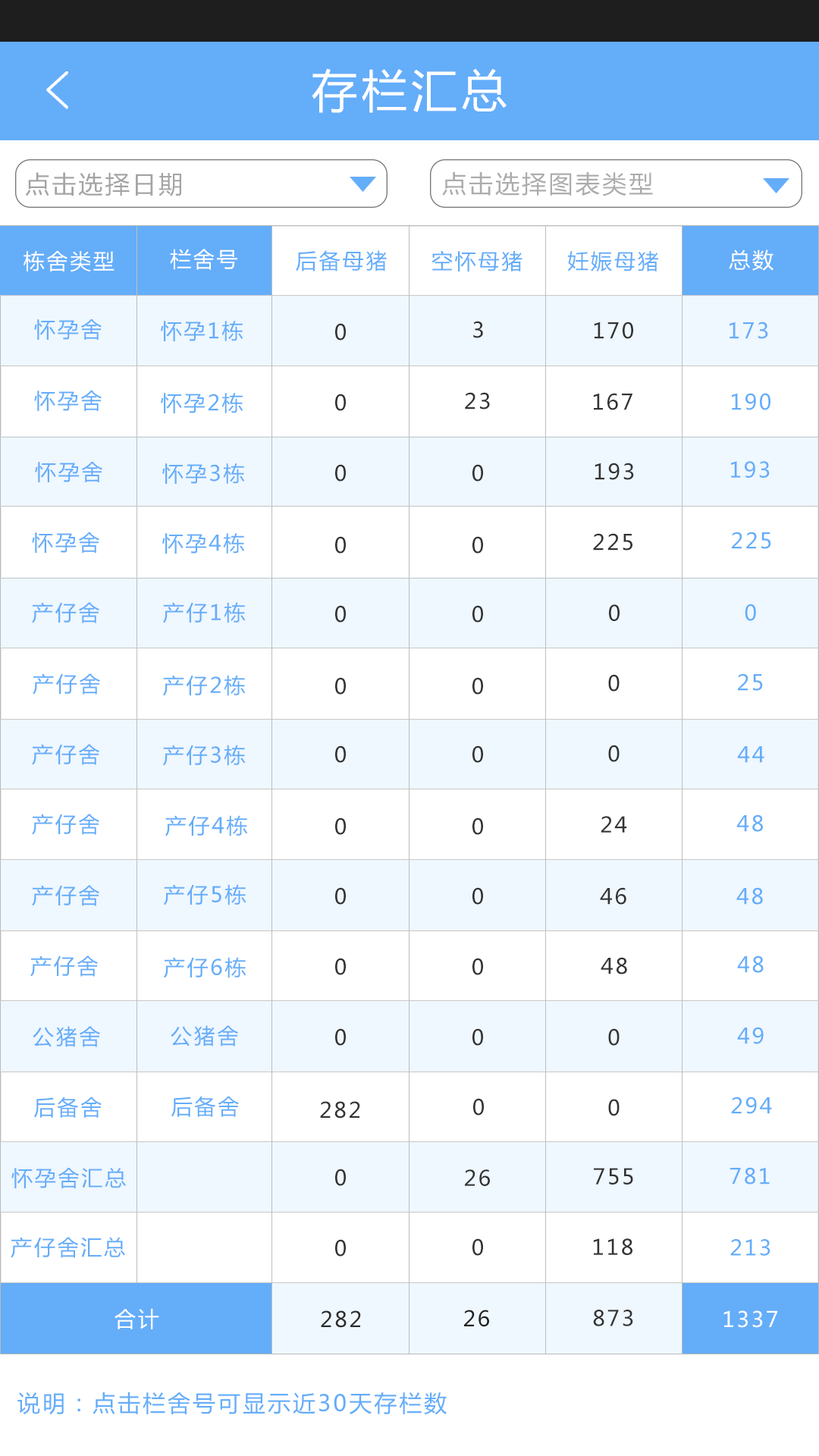
<style>
.page{position:relative;width:819px;height:1456px;background:#ffffff}
.page>*{position:absolute;margin:0}
.t1{font:45.5px "MicrosoftYaHei";letter-spacing:0.1em;color:#ffffff}
.t2{font:24.3px "MicrosoftYaHei";letter-spacing:0.1em;color:#a4a4a4}
.t3{font:24.3px "MicrosoftYaHei";letter-spacing:0.1em;color:#acacac}
.t4{font:21.2px "MicrosoftYaHei";letter-spacing:0.1em;color:#ffffff}
.t5{font:21.2px "MicrosoftYaHei";letter-spacing:0.1em;color:#64adf9}
.t6{font:21.2px "MicrosoftYaHei";letter-spacing:0.1em;color:#fefefe}
.t7{font:21.2px "MicrosoftYaHei";letter-spacing:0.1em;color:#333333}
.t8{font:21.2px "MicrosoftYaHei";letter-spacing:0.1em;color:#2b2b2b}
.t9{font:21.2px "MicrosoftYaHei";letter-spacing:0.1em;color:#222222}
.t10{font:21.2px "MicrosoftYaHei";letter-spacing:0.1em;color:#343434}
.t11{font:22.7px "MicrosoftYaHei";letter-spacing:0.1em;color:#64adf9}
</style>
<div class="page">
<p class="t1" style="left:312px;top:68px;width:195px;height:45px">存栏汇总</p>
<p class="t2" style="left:25px;top:172px;width:156px;height:24px">点击选择日期</p>
<p class="t3" style="left:442px;top:172px;width:211px;height:24px">点击选择图表类型</p>
<p class="t4" style="left:24px;top:251px;width:91px;height:21px">栋舍类型</p>
<p class="t4" style="left:170px;top:249px;width:67px;height:21px">栏舍号</p>
<p class="t5" style="left:296px;top:250px;width:91px;height:21px">后备母猪</p>
<p class="t5" style="left:431px;top:250px;width:91px;height:21px">空怀母猪</p>
<p class="t5" style="left:567px;top:251px;width:91px;height:20px">妊娠母猪</p>
<p class="t6" style="left:729px;top:249px;width:44px;height:22px">总数</p>
<p class="t5" style="left:34px;top:319px;width:68px;height:21px">怀孕舍</p>
<p class="t5" style="left:161px;top:321px;width:82px;height:20px">怀孕1栋</p>
<p class="t7" style="left:335px;top:323px;width:11px;height:17px">0</p>
<p class="t7" style="left:473px;top:321px;width:10px;height:17px">3</p>
<p class="t7" style="left:594px;top:322px;width:39px;height:17px">170</p>
<p class="t5" style="left:730px;top:322px;width:38px;height:17px">173</p>
<p class="t5" style="left:34px;top:391px;width:68px;height:20px">怀孕舍</p>
<p class="t5" style="left:161px;top:393px;width:82px;height:20px">怀孕2栋</p>
<p class="t7" style="left:335px;top:394px;width:11px;height:17px">0</p>
<p class="t7" style="left:465px;top:392px;width:25px;height:17px">23</p>
<p class="t7" style="left:593px;top:393px;width:39px;height:17px">167</p>
<p class="t5" style="left:732px;top:393px;width:38px;height:17px">190</p>
<p class="t5" style="left:35px;top:462px;width:67px;height:20px">怀孕舍</p>
<p class="t5" style="left:731px;top:461px;width:39px;height:17px">193</p>
<p class="t5" style="left:162px;top:463px;width:83px;height:21px">怀孕3栋</p>
<p class="t7" style="left:335px;top:464px;width:11px;height:18px">0</p>
<p class="t7" style="left:472px;top:464px;width:11px;height:18px">0</p>
<p class="t7" style="left:595px;top:463px;width:39px;height:17px">193</p>
<p class="t5" style="left:32px;top:532px;width:67px;height:21px">怀孕舍</p>
<p class="t5" style="left:162px;top:533px;width:83px;height:21px">怀孕4栋</p>
<p class="t7" style="left:593px;top:533px;width:39px;height:18px">225</p>
<p class="t5" style="left:732px;top:532px;width:39px;height:17px">225</p>
<p class="t7" style="left:335px;top:536px;width:11px;height:18px">0</p>
<p class="t7" style="left:472px;top:536px;width:11px;height:18px">0</p>
<p class="t5" style="left:32px;top:602px;width:67px;height:21px">产仔舍</p>
<p class="t5" style="left:163px;top:602px;width:83px;height:21px">产仔1栋</p>
<p class="t7" style="left:335px;top:605px;width:11px;height:18px">0</p>
<p class="t7" style="left:472px;top:605px;width:11px;height:18px">0</p>
<p class="t7" style="left:609px;top:604px;width:11px;height:17px">0</p>
<p class="t5" style="left:745px;top:604px;width:11px;height:17px">0</p>
<p class="t5" style="left:33px;top:673px;width:67px;height:22px">产仔舍</p>
<p class="t5" style="left:163px;top:675px;width:83px;height:21px">产仔2栋</p>
<p class="t7" style="left:335px;top:677px;width:11px;height:18px">0</p>
<p class="t7" style="left:472px;top:677px;width:11px;height:18px">0</p>
<p class="t7" style="left:608px;top:674px;width:12px;height:18px">0</p>
<p class="t5" style="left:738px;top:673px;width:25px;height:18px">25</p>
<p class="t5" style="left:32px;top:744px;width:67px;height:21px">产仔舍</p>
<p class="t5" style="left:163px;top:745px;width:83px;height:21px">产仔3栋</p>
<p class="t7" style="left:335px;top:745px;width:11px;height:18px">0</p>
<p class="t7" style="left:472px;top:745px;width:11px;height:18px">0</p>
<p class="t7" style="left:608px;top:745px;width:12px;height:17px">0</p>
<p class="t5" style="left:737px;top:746px;width:27px;height:17px">44</p>
<p class="t5" style="left:32px;top:814px;width:67px;height:21px">产仔舍</p>
<p class="t5" style="left:165px;top:815px;width:83px;height:21px">产仔4栋</p>
<p class="t7" style="left:335px;top:817px;width:11px;height:18px">0</p>
<p class="t7" style="left:472px;top:817px;width:11px;height:18px">0</p>
<p class="t7" style="left:601px;top:816px;width:26px;height:17px">24</p>
<p class="t5" style="left:736px;top:814px;width:27px;height:18px">48</p>
<p class="t5" style="left:32px;top:885px;width:67px;height:21px">产仔舍</p>
<p class="t5" style="left:164px;top:884px;width:82px;height:21px">产仔5栋</p>
<p class="t7" style="left:335px;top:887px;width:11px;height:18px">0</p>
<p class="t7" style="left:472px;top:887px;width:11px;height:18px">0</p>
<p class="t7" style="left:600px;top:887px;width:26px;height:18px">46</p>
<p class="t5" style="left:736px;top:887px;width:27px;height:18px">48</p>
<p class="t5" style="left:30px;top:955px;width:68px;height:22px">产仔舍</p>
<p class="t5" style="left:164px;top:957px;width:82px;height:21px">产仔6栋</p>
<p class="t7" style="left:335px;top:958px;width:11px;height:17px">0</p>
<p class="t7" style="left:472px;top:958px;width:11px;height:17px">0</p>
<p class="t7" style="left:601px;top:957px;width:26px;height:17px">48</p>
<p class="t5" style="left:737px;top:955px;width:27px;height:18px">48</p>
<p class="t5" style="left:171px;top:1025px;width:67px;height:21px">公猪舍</p>
<p class="t5" style="left:33px;top:1026px;width:67px;height:21px">公猪舍</p>
<p class="t7" style="left:335px;top:1028px;width:11px;height:18px">0</p>
<p class="t7" style="left:472px;top:1028px;width:11px;height:18px">0</p>
<p class="t7" style="left:608px;top:1028px;width:12px;height:18px">0</p>
<p class="t5" style="left:737px;top:1027px;width:27px;height:17px">49</p>
<p class="t5" style="left:34px;top:1097px;width:68px;height:21px">后备舍</p>
<p class="t5" style="left:171px;top:1096px;width:68px;height:21px">后备舍</p>
<p class="t5" style="left:731px;top:1097px;width:41px;height:17px">294</p>
<p class="t7" style="left:320px;top:1101px;width:40px;height:18px">282</p>
<p class="t7" style="left:473px;top:1098px;width:11px;height:17px">0</p>
<p class="t7" style="left:608px;top:1099px;width:12px;height:17px">0</p>
<p class="t5" style="left:11px;top:1168px;width:115px;height:20px">怀孕舍汇总</p>
<p class="t7" style="left:335px;top:1169px;width:11px;height:17px">0</p>
<p class="t7" style="left:465px;top:1169px;width:25px;height:17px">26</p>
<p class="t7" style="left:594px;top:1168px;width:39px;height:17px">755</p>
<p class="t5" style="left:730px;top:1167px;width:40px;height:18px">781</p>
<p class="t5" style="left:11px;top:1237px;width:114px;height:21px">产仔舍汇总</p>
<p class="t7" style="left:335px;top:1239px;width:11px;height:18px">0</p>
<p class="t7" style="left:472px;top:1238px;width:11px;height:18px">0</p>
<p class="t7" style="left:593px;top:1238px;width:39px;height:17px">118</p>
<p class="t5" style="left:730px;top:1239px;width:40px;height:17px">213</p>
<p class="t4" style="left:115px;top:1308px;width:44px;height:21px">合计</p>
<p class="t8" style="left:321px;top:1310px;width:40px;height:18px">282</p>
<p class="t9" style="left:464px;top:1310px;width:25px;height:17px">26</p>
<p class="t10" style="left:593px;top:1310px;width:40px;height:16px">873</p>
<p class="t4" style="left:723px;top:1310px;width:55px;height:18px">1337</p>
<p class="t11" style="left:17px;top:1392px;width:430px;height:23px">说明：点击栏舍号可显示近30天存栏数</p>
</div>
